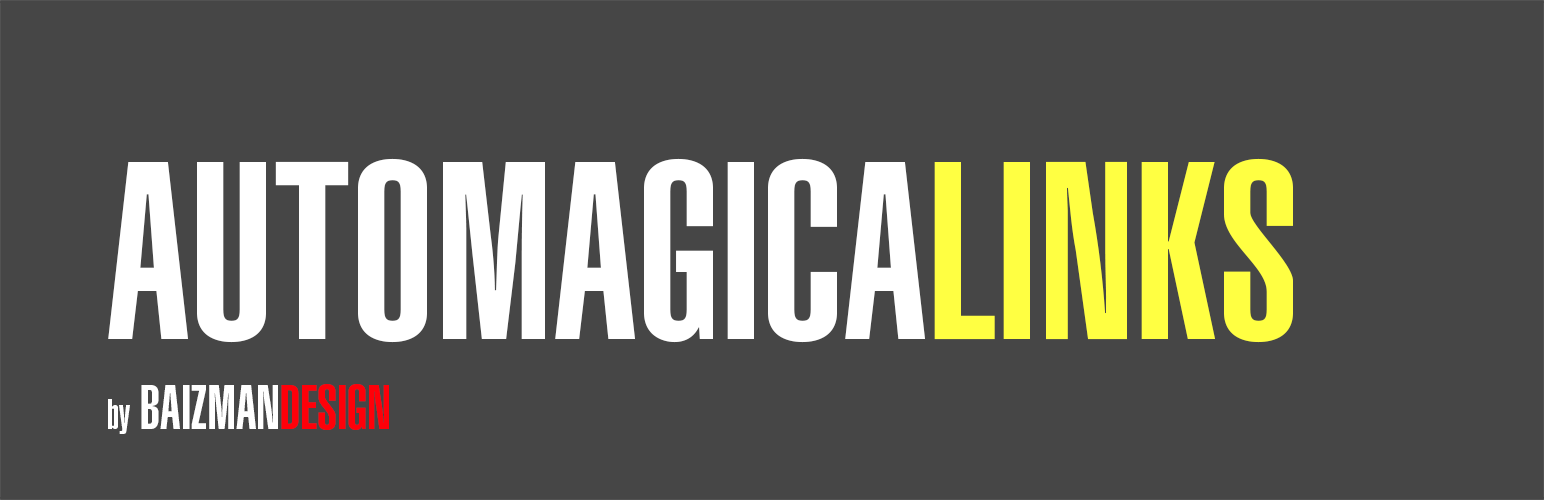
<style>
.page{position:relative;width:1544px;height:500px;background:#464646}
.page>*{position:absolute;margin:0}
.t1{font:248.8px "HelveticaLTStd-UltraComp";color:#ffffff;text-transform:uppercase}
.t2{font:248.8px "HelveticaLTStd-UltraComp";color:#ffff42;text-transform:uppercase}
.t3{font:60.8px "HelveticaLTStd-UltraComp";color:#ffffff;text-transform:uppercase}
.t4{font:40.8px "HelveticaLTStd-UltraComp";color:#ffffff}
.t5{font:60.8px "HelveticaLTStd-UltraComp";color:#ff0009;text-transform:uppercase}
</style>
<div class="page">
<p class="t1" style="left:108px;top:158px;width:1185px;height:185px">automagica<span class="t2">links</span></p>
<p class="t3" style="left:108px;top:384px;width:281px;height:50px"><span class="t4">by</span> baizman<span class="t5">design</span></p>
</div>
